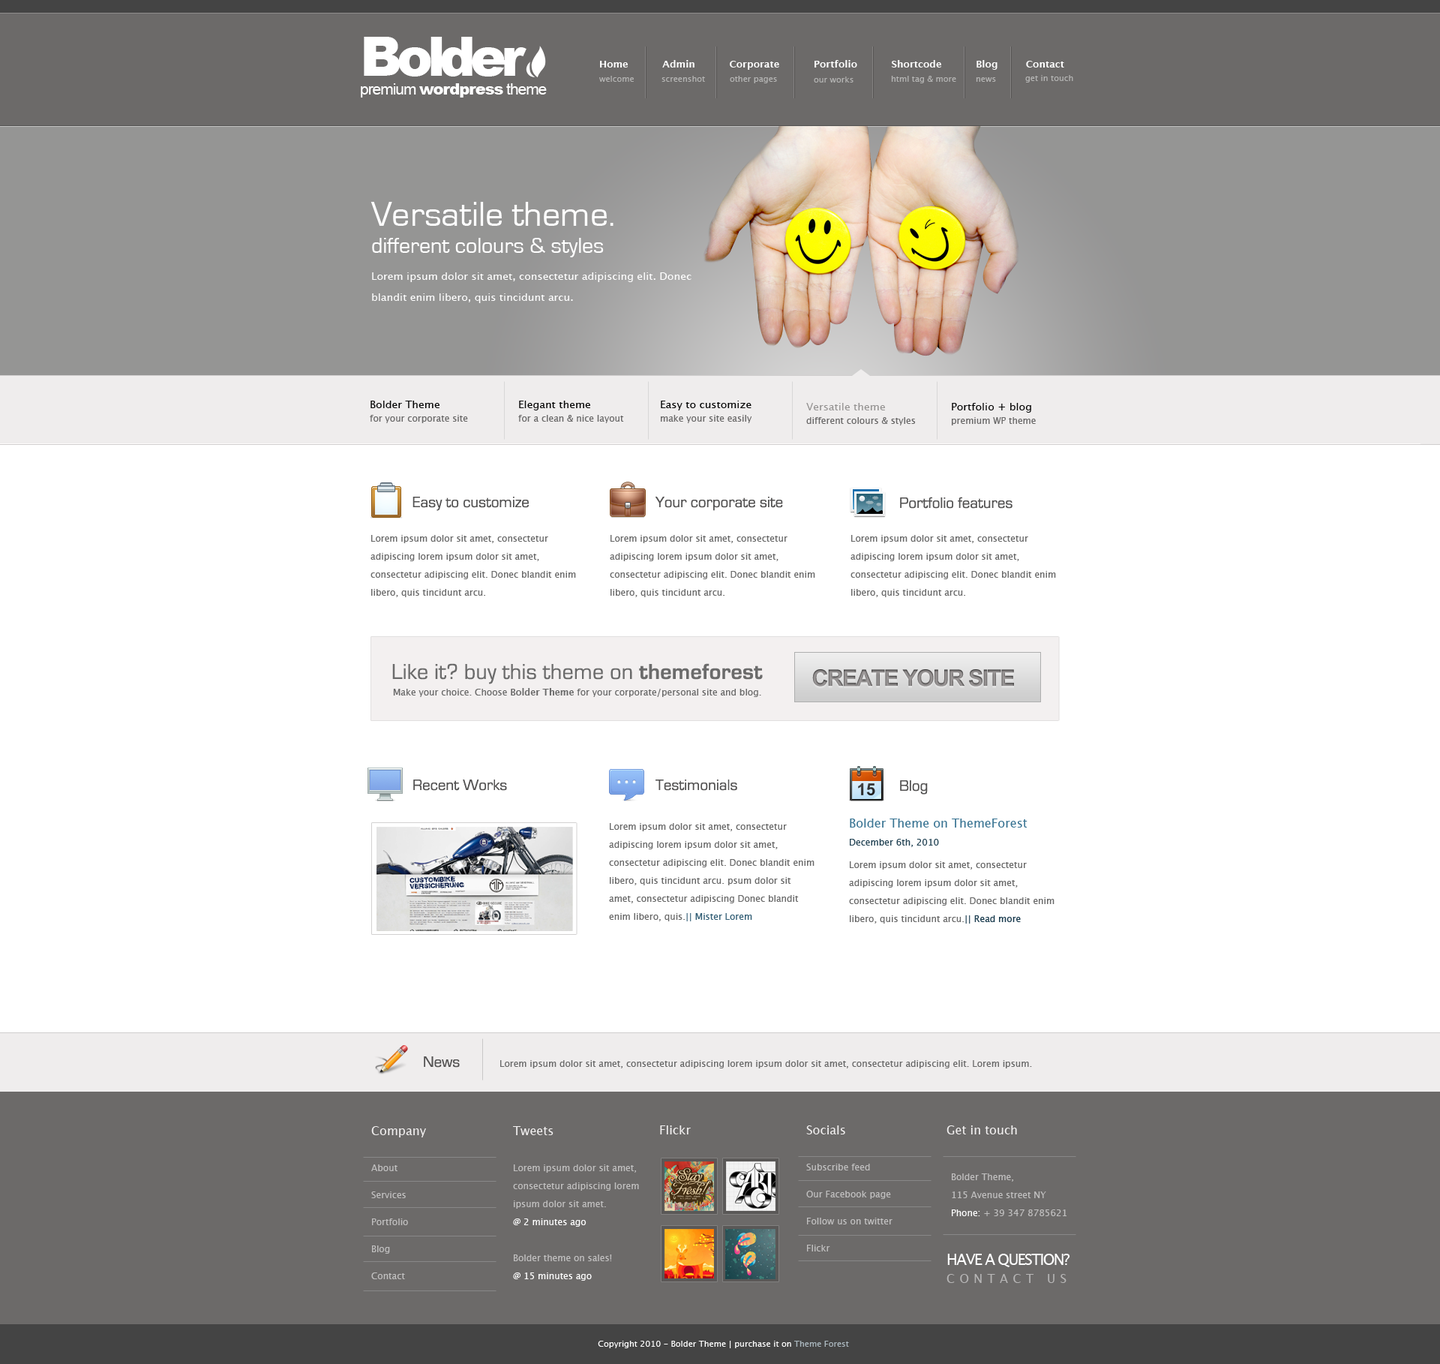
<style>
.page{position:relative;width:1440px;height:1364px;background:#ffffff}
.page>*{position:absolute;margin:0}
.t1{font:15.8px "Arial-Black";letter-spacing:-0.05em;color:#ffffff}
.t2{font:54px "Arial-Black";letter-spacing:-0.1em;color:#ffffff}
.t3{font:15.8px "ArialMT";letter-spacing:-0.05em;color:#ffffff}
.t4{font:9.8px "LucidaSans-Demi";color:#ffffff}
.t5{font:8.2px "LucidaSans";color:#b7b5b5}
.t6{font:10.5px/27px "LucidaSans";color:#ffffff}
.t7{font:36px "EurostileRegular";color:#ffffff}
.t8{font:22.5px "EurostileRegular";color:#ffffff}
.t9{font:10.5px/21px "LucidaSans";color:#ffffff}
.t10{font:9px/13.5px "LucidaSans";color:#6a6969}
.t11{font:10.5px/13.5px "LucidaSans";color:#060606}
.t12{font:10.5px/13.5px "LucidaSans";color:#959392}
.t13{font:15.8px "EurostileRegular";color:#535252}
.t14{font:9px/18px "LucidaSans";color:#696969}
.t15{font:22.5px "EurostileRegular";letter-spacing:0.01em;color:#6b6b6b}
.t16{font:22.5px "EurostileBold";letter-spacing:0.01em;color:#6b6b6b}
.t17{font:22.5px "Arial-BoldMT";letter-spacing:-0.05em;color:#898686}
.t18{font:9px "LucidaSans";color:#696969}
.t19{font:9px "LucidaSans-Demi";color:#696969}
.t20{font:12px/18px "LucidaSans";color:#397493}
.t21{font:9px/18px "LucidaSans";color:#244455}
.t22{font:9px/22.5px "LucidaSans";color:#696969}
.t23{font:9px/18px "LucidaSans";color:#183a4d}
.t24{font:9px/18px "LucidaSans";color:#366178}
.t25{font:9px/27px "LucidaSans";color:#c0bfbf}
.t26{font:12px/18px "LucidaSans";color:#f1efef}
.t27{font:9px/36px "LucidaSans";color:#c0bfbf}
.t28{font:9px/18px "LucidaSans";color:#c0bfbf}
.t29{font:9px/18px "LucidaSans";color:#ffffff}
.t30{font:12px "LucidaSans";color:#f1efef}
.t31{font:15px/36px "LucidaSans";letter-spacing:-0.075em;color:#ffffff}
.t32{font:12px/18px "LucidaSans";letter-spacing:0.4em;color:#b6b5b5}
.t33{font:8.2px "LucidaSans";color:#ffffff}
.t34{font:8.2px "LucidaSans";color:#abb8bf}
</style>
<div class="page">
<p class="t1" style="left:361px;top:37px;width:186px;height:61px"><span class="t2">Bolder<br></span><span class="t3">premium </span>wordpress<span class="t3"> theme</span></p>
<p class="t4" style="left:600px;top:60px;width:464px;height:10px">Home           Admin           Corporate           Portfolio           Shortcode           Blog         Contact</p>
<p class="t5" style="left:599px;top:76px;width:35px;height:6px">welcome</p>
<p class="t5" style="left:662px;top:76px;width:43px;height:6px">screenshot</p>
<p class="t5" style="left:730px;top:76px;width:47px;height:7px">other pages</p>
<p class="t5" style="left:814px;top:77px;width:40px;height:6px">our works</p>
<p class="t5" style="left:891px;top:76px;width:65px;height:7px">html tag &amp; more</p>
<p class="t5" style="left:976px;top:77px;width:20px;height:5px">news</p>
<p class="t5" style="left:1025px;top:75px;width:48px;height:8px">get in touch</p>
<p class="t6" style="left:371px;top:202px;width:321px;height:101px"><span class="t7">Versatile theme.<br></span><span class="t8">different colours &amp; styles<br></span>Lorem ipsum dolor sit amet, consectetur adipiscing elit. Donec <span class="t9">blandit enim libero, quis tincidunt arcu.</span></p>
<p class="t10" style="left:370px;top:401px;width:98px;height:22px"><span class="t11">Bolder Theme<br></span>for your corporate site</p>
<p class="t10" style="left:518px;top:401px;width:106px;height:22px"><span class="t11">Elegant theme<br></span>for a clean &amp; nice layout</p>
<p class="t10" style="left:661px;top:401px;width:91px;height:22px"><span class="t11">Easy to customize<br></span>make your site easily</p>
<p class="t10" style="left:806px;top:403px;width:110px;height:22px"><span class="t12">Versatile theme<br></span>different colours &amp; styles</p>
<p class="t11" style="left:952px;top:403px;width:84px;height:22px">Portfolio + blog<br><span class="t10">premium WP theme</span></p>
<p class="t13" style="left:413px;top:497px;width:116px;height:14px">Easy to customize</p>
<p class="t13" style="left:655px;top:497px;width:128px;height:14px">Your corporate site</p>
<p class="t13" style="left:900px;top:497px;width:113px;height:12px">Portfolio features</p>
<p class="t14" style="left:371px;top:535px;width:205px;height:62px">Lorem ipsum dolor sit amet, consectetur adipiscing lorem ipsum dolor sit amet, consectetur adipiscing elit. Donec blandit enim libero, quis tincidunt arcu.</p>
<p class="t14" style="left:610px;top:535px;width:205px;height:62px">Lorem ipsum dolor sit amet, consectetur adipiscing lorem ipsum dolor sit amet, consectetur adipiscing elit. Donec blandit enim libero, quis tincidunt arcu.</p>
<p class="t14" style="left:851px;top:535px;width:205px;height:62px">Lorem ipsum dolor sit amet, consectetur adipiscing lorem ipsum dolor sit amet, consectetur adipiscing elit. Donec blandit enim libero, quis tincidunt arcu.</p>
<p class="t15" style="left:392px;top:663px;width:371px;height:21px">Like it? buy this theme on <span class="t16">themeforest</span></p>
<p class="t17" style="left:812px;top:669px;width:202px;height:17px">CREATE YOUR SITE</p>
<p class="t18" style="left:393px;top:688px;width:368px;height:9px">Make your choice. Choose <span class="t19">Bolder Theme</span> for your corporate/personal site and blog.</p>
<p class="t13" style="left:413px;top:779px;width:94px;height:12px">Recent Works</p>
<p class="t13" style="left:656px;top:779px;width:81px;height:12px">Testimonials</p>
<p class="t13" style="left:900px;top:780px;width:28px;height:14px">Blog</p>
<p class="t14" style="left:849px;top:818px;width:206px;height:105px"><span class="t20">Bolder Theme on ThemeForest<br></span><span class="t21">December 6th, 2010<br></span><span class="t22">Lorem ipsum dolor sit amet, consectetur </span>adipiscing lorem ipsum dolor sit amet, consectetur adipiscing elit. Donec blandit enim libero, quis tincidunt arcu.<span class="t23">|| Read more</span></p>
<p class="t14" style="left:609px;top:823px;width:206px;height:98px">Lorem ipsum dolor sit amet, consectetur adipiscing lorem ipsum dolor sit amet, consectetur adipiscing elit. Donec blandit enim libero, quis tincidunt arcu. psum dolor sit amet, consectetur adipiscing Donec blandit enim libero, quis.<span class="t24">|| Mister Lorem</span></p>
<p class="t13" style="left:424px;top:1056px;width:36px;height:11px">News</p>
<p class="t18" style="left:500px;top:1060px;width:532px;height:8px">Lorem ipsum dolor sit amet, consectetur adipiscing lorem ipsum dolor sit amet, consectetur adipiscing elit. Lorem ipsum.</p>
<p class="t25" style="left:371px;top:1126px;width:55px;height:153px"><span class="t26">Company<br></span><span class="t27">About<br></span>Services<br>Portfolio<br>Blog<br>Contact</p>
<p class="t28" style="left:513px;top:1126px;width:126px;height:154px"><span class="t26">Tweets<br></span><span class="t27">Lorem ipsum dolor sit amet, </span>consectetur adipiscing lorem ipsum dolor sit amet.<br><span class="t29">@ 2 minutes ago<br></span><span class="t27">Bolder theme on sales!<br></span><span class="t29">@ 15 minutes ago</span></p>
<p class="t30" style="left:660px;top:1125px;width:31px;height:9px">Flickr</p>
<p class="t25" style="left:806px;top:1125px;width:87px;height:126px"><span class="t26">Socials<br></span><span class="t27">Subscribe feed<br></span>Our Facebook page<br>Follow us on twitter<br>Flickr</p>
<p class="t30" style="left:947px;top:1125px;width:70px;height:9px">Get in touch</p>
<p class="t28" style="left:952px;top:1173px;width:115px;height:43px"><span class="t26"><br></span><span class="t27">Bolder Theme,<br></span>115 Avenue street NY<br><span class="t29">Phone:</span> + 39 347 8785621</p>
<p class="t31" style="left:947px;top:1253px;width:123px;height:30px">HAVE A QUESTION?<br><span class="t32">CONTACT US</span></p>
<p class="t33" style="left:598px;top:1340px;width:251px;height:8px">Copyright 2010 - Bolder Theme | purchase it on <span class="t34">Theme Forest</span></p>
</div>
